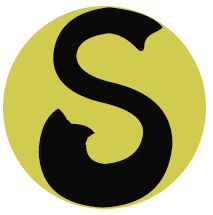
<style>
.page{position:relative;width:213px;height:215px;background:#d1cc4f}
.page>*{position:absolute;margin:0}
.t1{font:301.5px "FZPHTK--GBK1-0";color:#0a0a0a;scale:1.03 1}
</style>
<div class="page">
<p class="t1" style="left:38px;top:7px;width:135px;height:201px">S</p>
</div>
